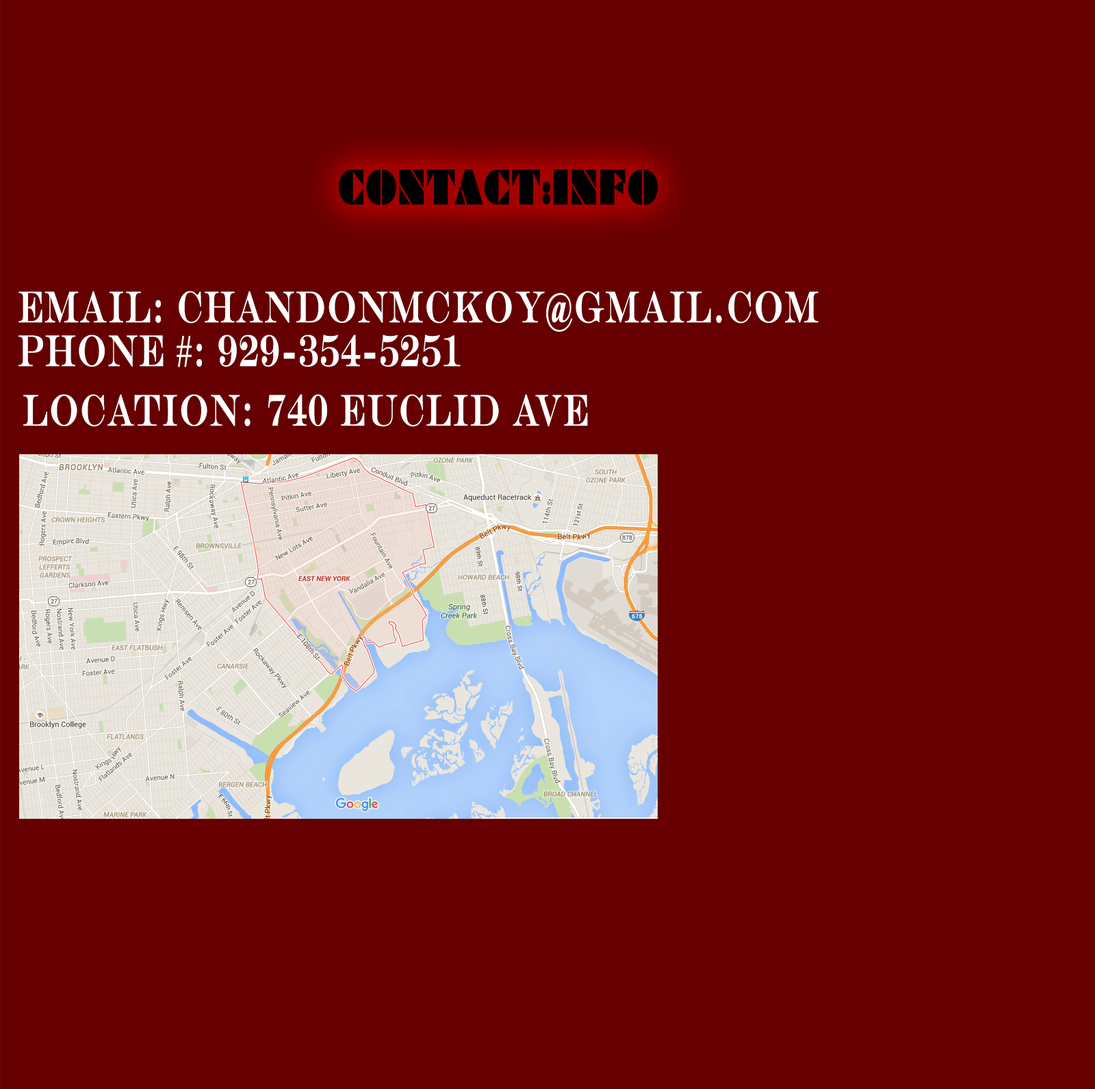
<style>
.page{position:relative;width:1095px;height:1089px;background:#660000}
.page>*{position:absolute;margin:0}
.t1{font:44.3px/5.5px "EngraversMT";letter-spacing:0.01em;color:#ffffff;font-weight:bold;scale:0.69 1}
.t2{font:44.3px "EngraversMT";letter-spacing:0.01em;color:#ffffff;font-weight:bold;scale:0.69 1}
</style>
<div class="page">
<p class="t1" style="left:18px;top:291px;width:800px;height:76px">EMAIL: CHANDONMCKOY@GMAIL.COM<br><br><br><br><br><br><br><br>PHONE #: 929-354-5251</p>
<p class="t2" style="left:23px;top:394px;width:565px;height:33px">Location: 740 euclid ave</p>
</div>
